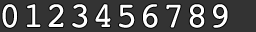
<style>
.page{position:relative;width:256px;height:32px;background:#333333}
.page>*{position:absolute;margin:0}
.t1{font:36px "Courier";letter-spacing:0.05em;color:#ffffff}
</style>
<div class="page">
<p class="t1" style="left:2px;top:4px;width:226px;height:24px">0123456789</p>
</div>
